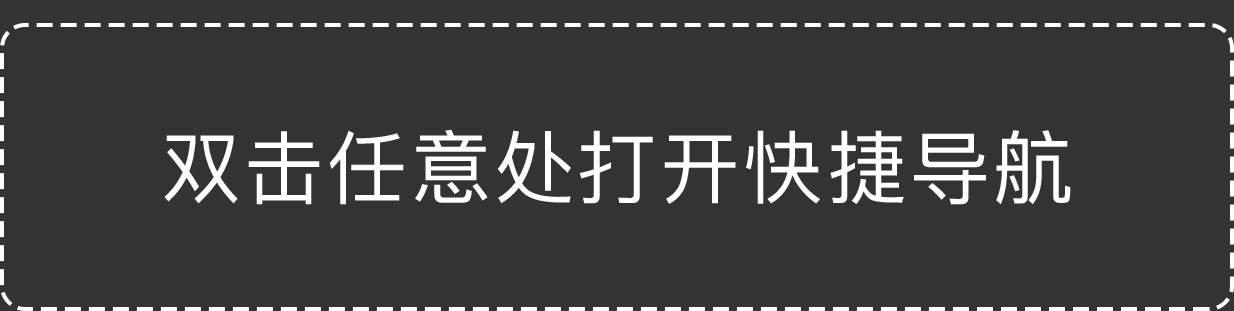
<style>
.page{position:relative;width:1234px;height:311px;background:#333333}
.page>*{position:absolute;margin:0}
.t1{font:80px "PingFang-SC-Medium";letter-spacing:0.04em;color:#ffffff;text-transform:uppercase}
</style>
<div class="page">
<p class="t1" style="left:164px;top:129px;width:907px;height:76px">双击任意处打开快捷导航</p>
</div>
